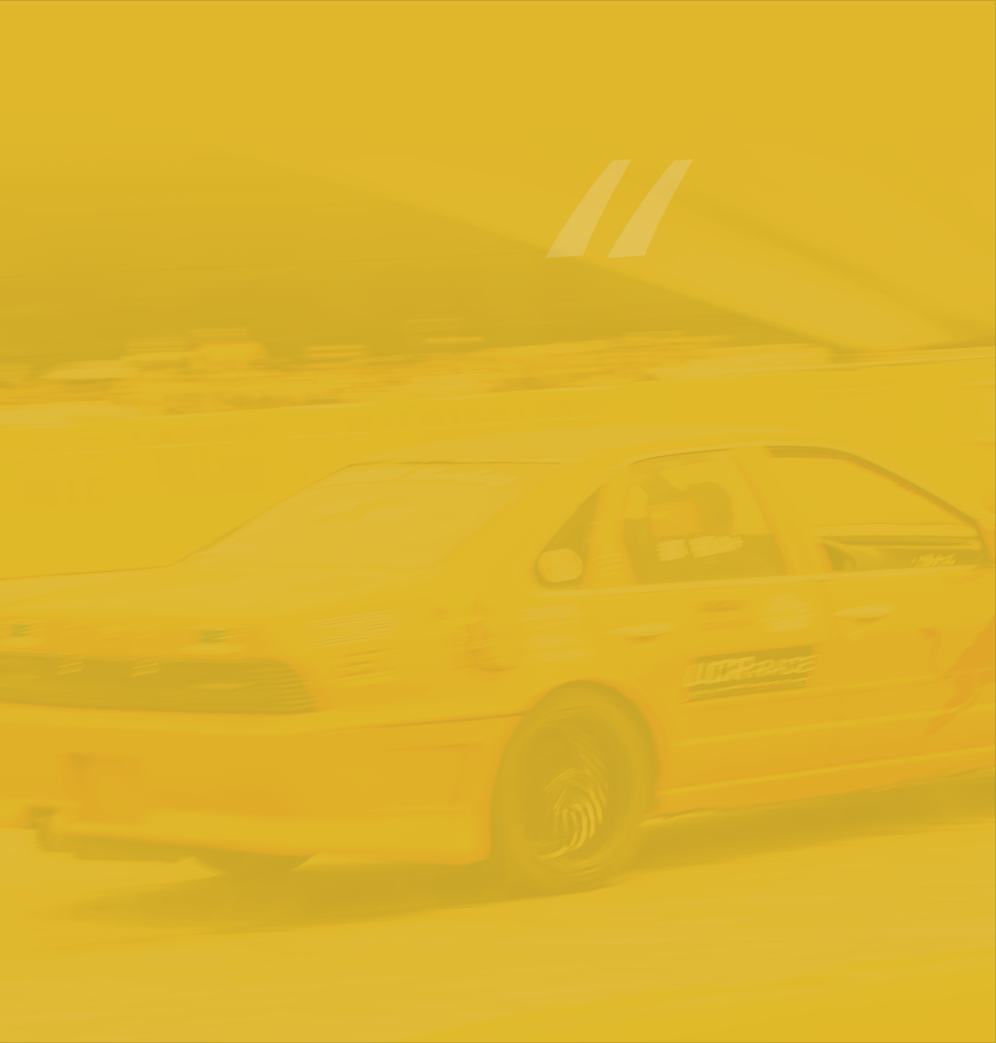
<style>
.page{position:relative;width:996px;height:1043px}
.page>*{position:absolute;margin:0}
.t1{font:400px "AdobeHeitiStd-Regular";color:#e4c052;font-style:italic}
</style>
<div class="page">
<p class="t1" style="left:545px;top:159px;width:149px;height:99px">“</p>
</div>
